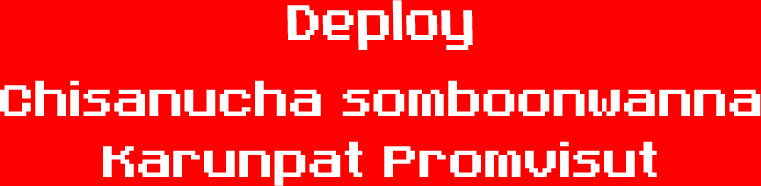
<style>
.page{position:relative;width:761px;height:186px;background:#ff0000}
.page>*{position:absolute;margin:0}
.t1{font:67.9px "#ZFTerminal";color:#ffffff;scale:0.88 1}
.t2{font:60px "#ZFTerminal";color:#ffffff}
</style>
<div class="page">
<p class="t1" style="left:287px;top:0px;width:186px;height:50px">Deploy</p>
<p class="t2" style="left:0px;top:80px;width:761px;height:36px">Chisanucha somboonwanna</p>
<p class="t2" style="left:103px;top:141px;width:554px;height:45px">Karunpat Promvisut</p>
</div>
